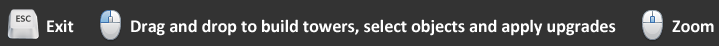
<style>
.page{position:relative;width:719px;height:46px;background:#333333}
.page>*{position:absolute;margin:0}
.t1{font:10px "Calibri-Bold";color:#424242}
.t2{font:18px "Calibri-Bold";color:#ffffff}
</style>
<div class="page">
<p class="t1" style="left:16px;top:15px;width:15px;height:7px">ESC</p>
<p class="t2" style="left:47px;top:20px;width:27px;height:13px">Exit</p>
<p class="t2" style="left:131px;top:19px;width:485px;height:17px">Drag and drop to build towers, select objects and apply upgrades</p>
<p class="t2" style="left:672px;top:20px;width:42px;height:13px">Zoom</p>
</div>
